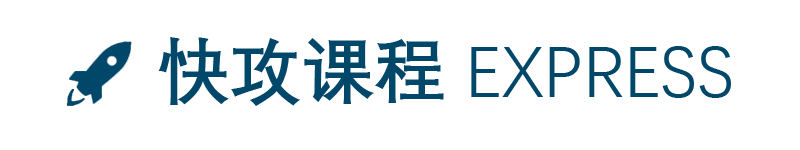
<style>
.page{position:relative;width:800px;height:150px;background:#ffffff}
.page>*{position:absolute;margin:0}
.t1{font:72px "DengXian-Regular";color:#00476a}
.t2{font:72px "DengXian-Bold";color:#00476a}
</style>
<div class="page">
<p class="t1" style="left:158px;top:37px;width:573px;height:69px"><span class="t2">快攻课程 </span>EXPRESS</p>
</div>
